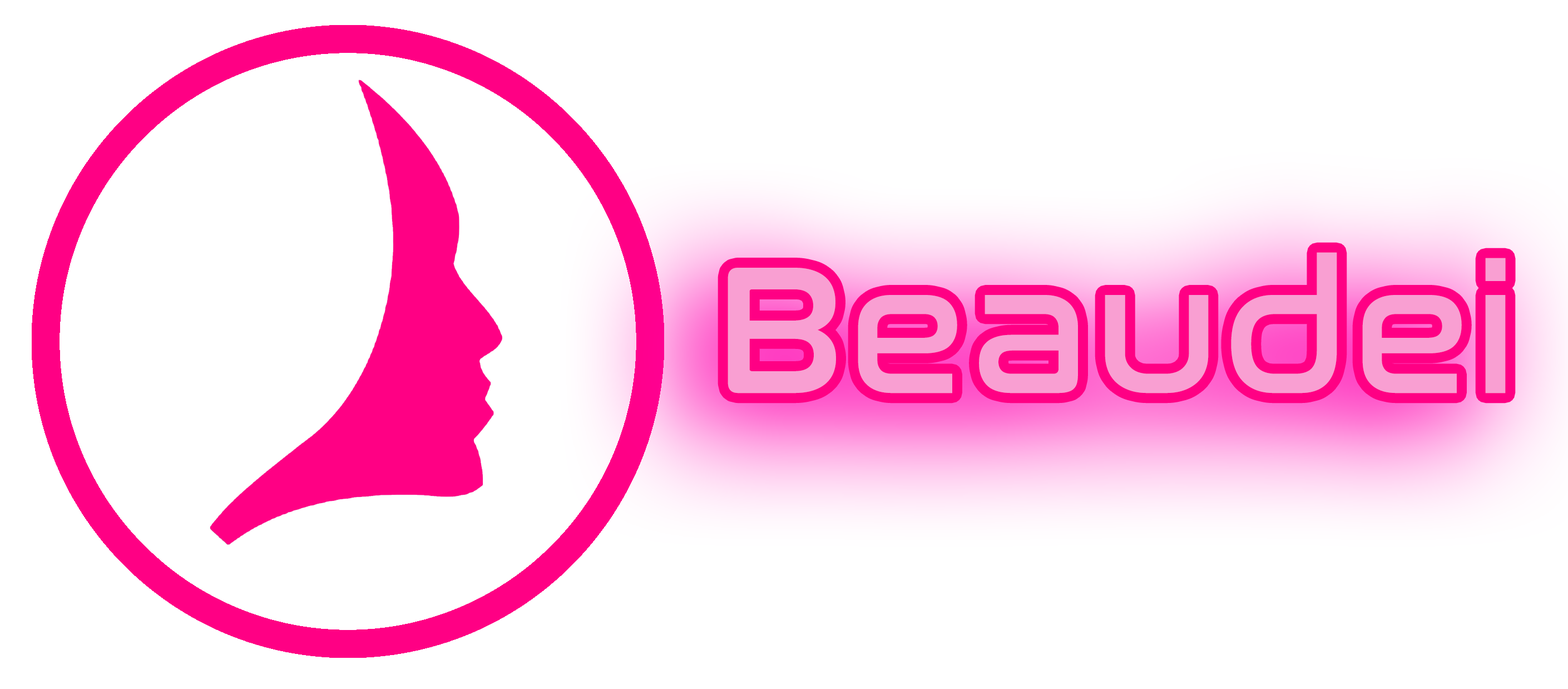
<style>
.page{position:relative;width:1568px;height:689px;background:#ffffff}
.page>*{position:absolute;margin:0}
.t1{font:185.4px "NasalizationRg-Regular";color:#f99fd2}
</style>
<div class="page">
<p class="t1" style="left:728px;top:252px;width:778px;height:141px">Beaudei</p>
</div>
